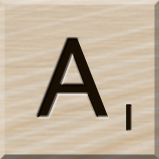
<style>
.page{position:relative;width:159px;height:159px}
.page>*{position:absolute;margin:0}
.t1{font:116px "MS-UIGothic";color:#180e01}
.t2{font:36px "GillSansMT";color:#1c1101;font-weight:bold;scale:1.1 1}
</style>
<div class="page">
<p class="t1" style="left:37px;top:38px;width:72px;height:80px">A</p>
<p class="t2" style="left:126px;top:104px;width:6px;height:27px">1</p>
</div>
